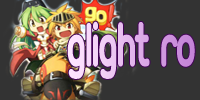
<style>
.page{position:relative;width:200px;height:100px;background:#333333}
.page>*{position:absolute;margin:0}
.t1{font:66.5px "Ubuntu-Title";letter-spacing:-0.075em;font-weight:bold;scale:0.65 1}
</style>
<div class="page">
<p class="t1" style="left:67px;top:21px;width:128px;height:58px">Glight RO</p>
</div>
